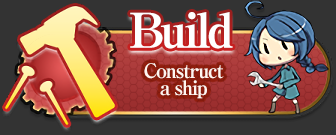
<style>
.page{position:relative;width:336px;height:135px;background:#333333}
.page>*{position:absolute;margin:0}
.t1{font:48px "RyuminPro-ExBold";letter-spacing:-0.08em;color:#ffffff}
.t2{font:20px/17px "RyuminPro-ExBold";letter-spacing:-0.08em;color:#fff6f1}
</style>
<div class="page">
<p class="t1" style="left:130px;top:12px;width:103px;height:37px">Build</p>
<p class="t2" style="left:144px;top:63px;width:80px;height:36px;text-align:center">Construct<br>a ship</p>
</div>
